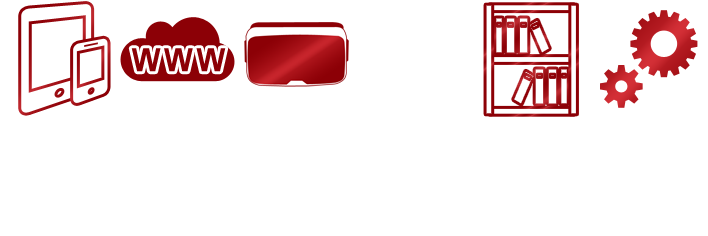
<style>
.page{position:relative;width:708px;height:236px;background:#ffffff}
.page>*{position:absolute;margin:0}
.t1{font:32px "Arial-BoldMT";letter-spacing:0.12em;color:#8c0006;scale:0.95 1}
</style>
<div class="page">
<p class="t1" style="left:131px;top:48px;width:95px;height:24px">WWW</p>
</div>
